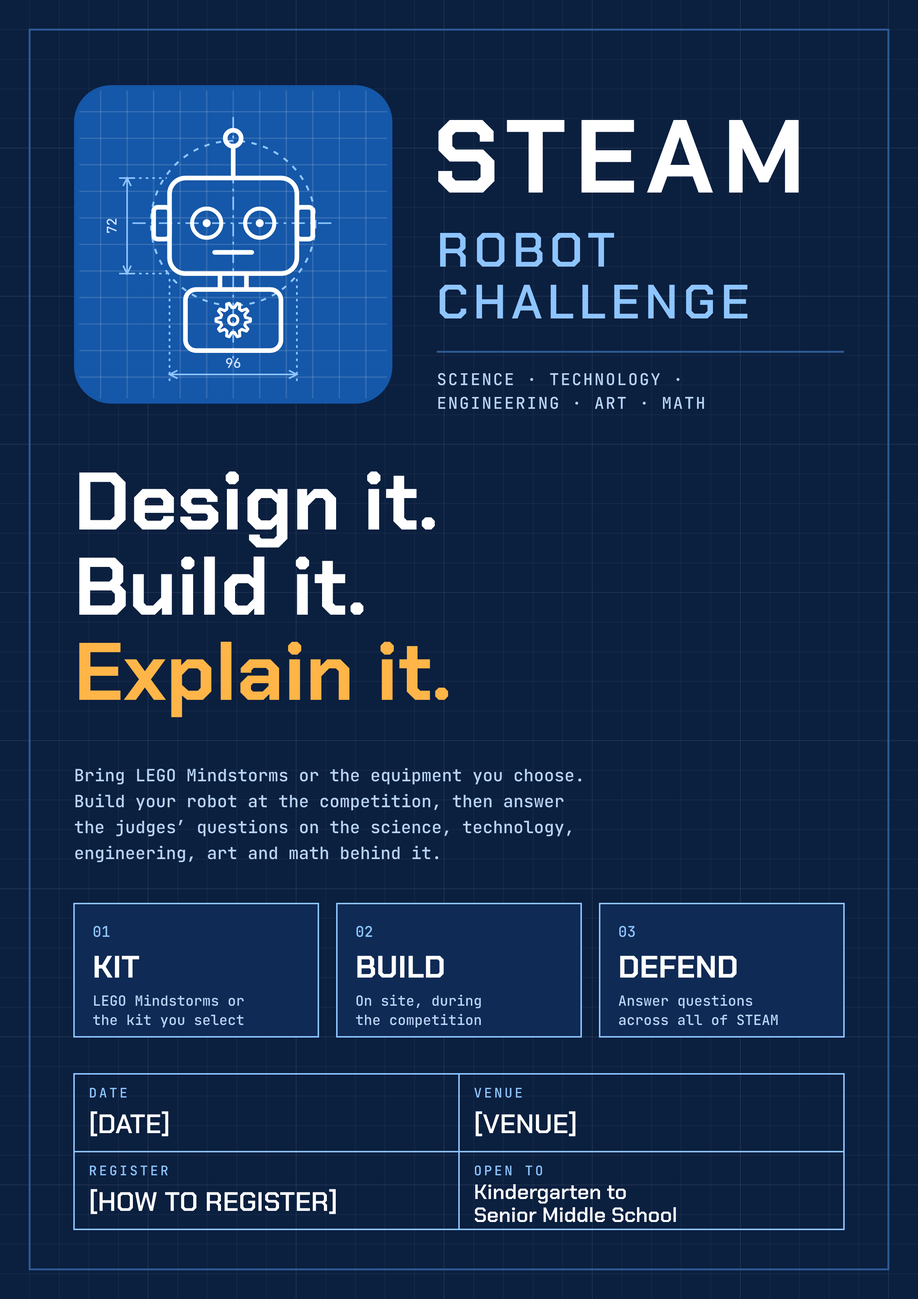
<style>
.page{position:relative;width:918px;height:1299px;background:#0b1f3f}
.page>*{position:absolute;margin:0}
.t1{font:103.7px "ChakraPetch-Bold";letter-spacing:0.086em;color:#ffffff}
.t2{font:48.1px/51.8px "ChakraPetch-SemiBold";letter-spacing:0.108em;color:#8ec5ff}
.t3{font:16.3px/23.7px "JetBrainsMono-Medium";letter-spacing:0.091em;color:#b9d4f5}
.t4{font:81.4px/85.2px "ChakraPetch-Bold";color:#ffffff}
.t5{font:81.4px "ChakraPetch-Bold";color:#ffb547}
.t6{font:17px/25.9px "JetBrainsMono-Medium";color:#b9d4f5}
.t7{font:14.8px "JetBrainsMono-Medium";color:#8ec5ff}
.t8{font:31.1px "ChakraPetch-Bold";color:#ffffff}
.t9{font:14.1px/19.3px "JetBrainsMono-Medium";color:#b9d4f5}
.t10{font:13.3px "JetBrainsMono-Medium";letter-spacing:0.167em;color:#8ec5ff}
.t11{font:26.7px "ChakraPetch-SemiBold";color:#ffffff}
.t12{font:20.7px/23px "ChakraPetch-SemiBold";color:#ffffff}
</style>
<div class="page">
<p class="t1" style="left:438px;top:120px;width:361px;height:73px">STEAM</p>
<p class="t2" style="left:439px;top:233px;width:308px;height:85px">ROBOT<br>CHALLENGE</p>
<p class="t3" style="left:438px;top:373px;width:266px;height:36px">SCIENCE · TECHNOLOGY ·<br>ENGINEERING · ART · MATH</p>
<p class="t4" style="left:79px;top:471px;width:356px;height:144px">Design it.<br>Build it.</p>
<p class="t5" style="left:79px;top:642px;width:369px;height:75px">Explain it.</p>
<p class="t6" style="left:75px;top:768px;width:507px;height:94px">Bring LEGO Mindstorms or the equipment you choose.<br>Build your robot at the competition, then answer<br>the judges’ questions on the science, technology,<br>engineering, art and math behind it.</p>
<p class="t7" style="left:94px;top:926px;width:16px;height:11px">01</p>
<p class="t7" style="left:357px;top:926px;width:15px;height:11px">02</p>
<p class="t7" style="left:619px;top:926px;width:16px;height:11px">03</p>
<p class="t8" style="left:94px;top:956px;width:45px;height:21px">KIT</p>
<p class="t8" style="left:357px;top:956px;width:87px;height:21px">BUILD</p>
<p class="t8" style="left:620px;top:956px;width:117px;height:21px">DEFEND</p>
<p class="t9" style="left:93px;top:994px;width:151px;height:33px">LEGO Mindstorms or<br>the kit you select</p>
<p class="t9" style="left:356px;top:994px;width:125px;height:33px">On site, during<br>the competition</p>
<p class="t9" style="left:619px;top:994px;width:159px;height:31px">Answer questions<br>across all of STEAM</p>
<p class="t10" style="left:90px;top:1087px;width:37px;height:10px">DATE</p>
<p class="t10" style="left:474px;top:1087px;width:48px;height:11px">VENUE</p>
<p class="t11" style="left:91px;top:1111px;width:77px;height:25px">[DATE]</p>
<p class="t11" style="left:476px;top:1111px;width:100px;height:25px">[VENUE]</p>
<p class="t10" style="left:90px;top:1165px;width:78px;height:10px">REGISTER</p>
<p class="t10" style="left:475px;top:1165px;width:67px;height:10px">OPEN TO</p>
<p class="t11" style="left:91px;top:1189px;width:245px;height:25px">[HOW TO REGISTER]</p>
<p class="t12" style="left:475px;top:1184px;width:201px;height:38px">Kindergarten to<br>Senior Middle School</p>
</div>
